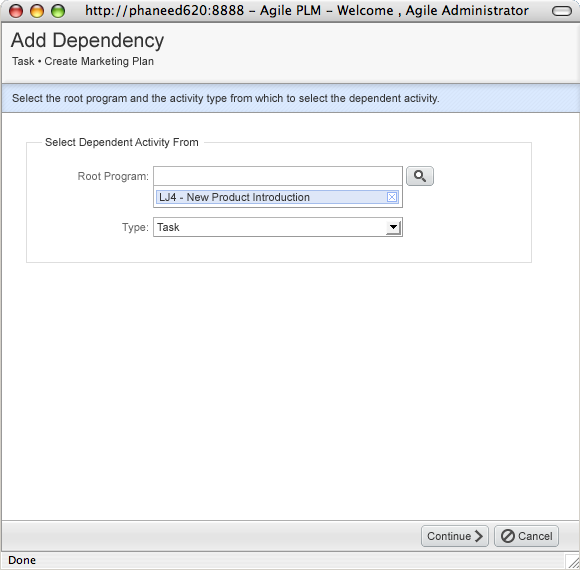
<style>
.page{position:relative;width:580px;height:570px;background:#ffffff}
.page>*{position:absolute;margin:0}
.t1{font:20px "ArialMT";color:#333333}
.t2{font:11px "ArialMT";color:#333333}
.t3{font:11px "ArialMT";color:#666666}
</style>
<div class="page">
<p class="t1" style="left:10px;top:32px;width:154px;height:20px">Add Dependency</p>
<p class="t2" style="left:12px;top:57px;width:142px;height:11px">Task • Create Marketing Plan</p>
<p class="t2" style="left:12px;top:94px;width:427px;height:11px">Select the root program and the activity type from which to select the dependent activity.</p>
<p class="t2" style="left:45px;top:138px;width:153px;height:11px">Select Dependent Activity From</p>
<p class="t3" style="left:78px;top:172px;width:70px;height:11px">Root Program:</p>
<p class="t2" style="left:160px;top:193px;width:150px;height:8px">LJ4 - New Product Introduction</p>
<p class="t3" style="left:122px;top:223px;width:26px;height:11px">Type:</p>
<p class="t2" style="left:157px;top:223px;width:23px;height:8px">Task</p>
<p class="t2" style="left:427px;top:532px;width:44px;height:8px">Continue</p>
<p class="t2" style="left:518px;top:532px;width:34px;height:8px">Cancel</p>
</div>
